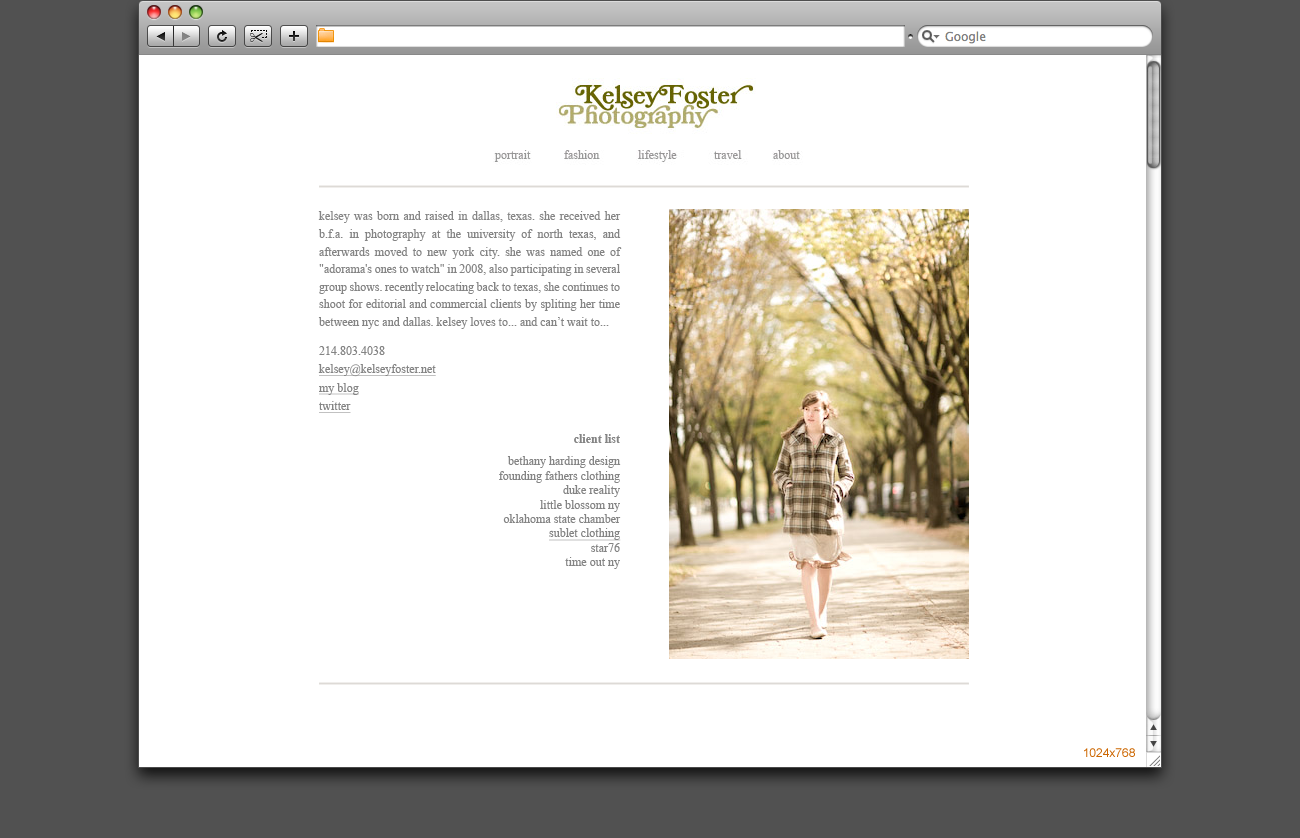
<style>
.page{position:relative;width:1300px;height:838px;background:#ffffff}
.page>*{position:absolute;margin:0}
.t1{font:12px/17.6px "TimesNewRomanPSMT";color:#848484}
.t2{font:12px "TimesNewRomanPSMT";color:#848484}
.t3{font:12px/18.4px "TimesNewRomanPSMT";color:#848484;text-decoration:underline}
.t4{font:12px "TimesNewRomanPS-BoldMT";color:#848484}
.t5{font:12px/22.4px "TimesNewRomanPSMT";color:#848484}
.t6{font:12px "TimesNewRomanPSMT";color:#848484;text-decoration:underline}
.t7{font:12px "ArialMT";color:#cc6600}
</style>
<div class="page">
<p class="t1" style="left:318px;top:211px;width:304px;height:202px;text-align:justify">kelsey was born and raised in dallas, texas. she received her b.f.a. in photography at the university of north texas, and afterwards moved to new york city. she was named one of "adorama's ones to watch" in 2008, also participating in several group shows. recently relocating back to texas, she continues to shoot for editorial and commercial clients by spliting her time between nyc and dallas. kelsey loves to... and can’t wait to...<br><br><span class="t2">214.803.4038<br></span><span class="t3">kelsey@kelseyfoster.net<br>my blog<br>twitter</span></p>
<p class="t2" style="left:499px;top:434px;width:122px;height:135px;text-align:right"><span class="t4">client list<br></span><span class="t5">bethany harding design<br></span>founding fathers clothing<br>duke reality<br>little blossom ny<br>oklahoma state chamber<br><span class="t6">sublet clothing<br></span>star76<br>time out ny</p>
<p class="t7" style="left:1084px;top:748px;width:51px;height:9px">1024x768</p>
</div>
